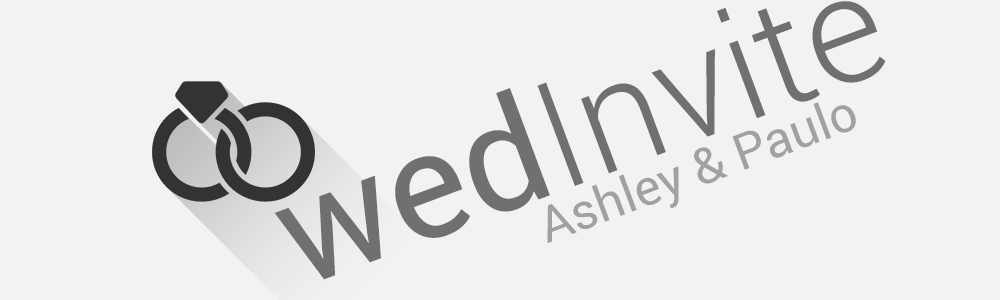
<style>
.page{position:relative;width:1000px;height:300px;background:#f2f2f2}
.page>*{position:absolute;margin:0}
.t1{font:150px "Roboto-Light";color:#707070}
.t2{font:150px "Roboto-Regular";color:#707070}
.t3{font:50px "Roboto-Regular";color:#a1a1a1}
</style>
<div class="page">
<p class="t1" style="left:274px;top:1px;width:612px;height:279px;rotate:-20deg"><span class="t2">wed</span>Invite</p>
<p class="t3" style="left:547px;top:102px;width:309px;height:142px;rotate:-20deg">Ashley &amp; Paulo</p>
</div>
